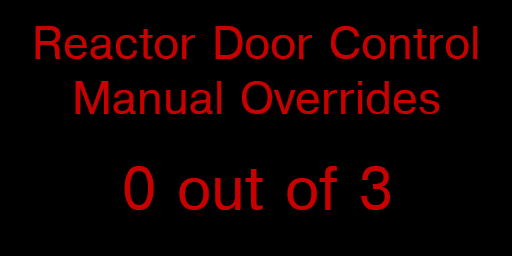
<style>
.page{position:relative;width:512px;height:256px;background:#000000}
.page>*{position:absolute;margin:0}
.t1{font:46px "Helvetica";color:#c80000}
.t2{font:60px "Helvetica";color:#c80000}
</style>
<div class="page">
<p class="t1" style="left:35px;top:26px;width:443px;height:88px;text-align:center">Reactor Door Control<br>Manual Overrides</p>
<p class="t2" style="left:124px;top:166px;width:266px;height:44px">0 out of 3</p>
</div>
